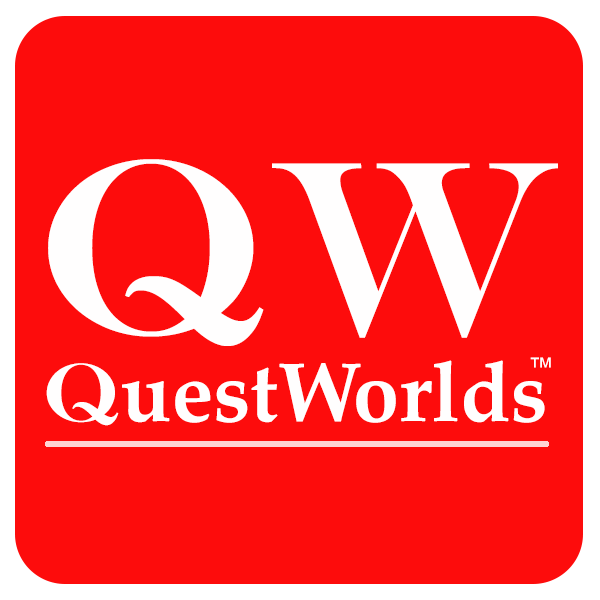
<style>
.page{position:relative;width:600px;height:600px;background:#fd0c0c}
.page>*{position:absolute;margin:0}
.t1{font:250px "EngraversMT";color:#fffefe}
.t2{font:83.3px "PalatinoLinotype-Bold";color:#fffefe}
.t3{font:83.3px "EngraversMT";color:#fffefe}
.t4{font:83.3px "PalatinoLinotype-Bold";letter-spacing:-0.1em;color:#fffefe}
.t5{font:25px "ArialMT";color:#fffefe}
</style>
<div class="page">
<p class="t1" style="left:48px;top:159px;width:216px;height:187px">Q</p>
<p class="t1" style="left:272px;top:163px;width:286px;height:175px">W</p>
<p class="t2" style="left:46px;top:360px;width:499px;height:66px"><span class="t3">Q</span>uest<span class="t4">W</span>orlds</p>
<p class="t5" style="left:530px;top:357px;width:21px;height:11px">™</p>
</div>
